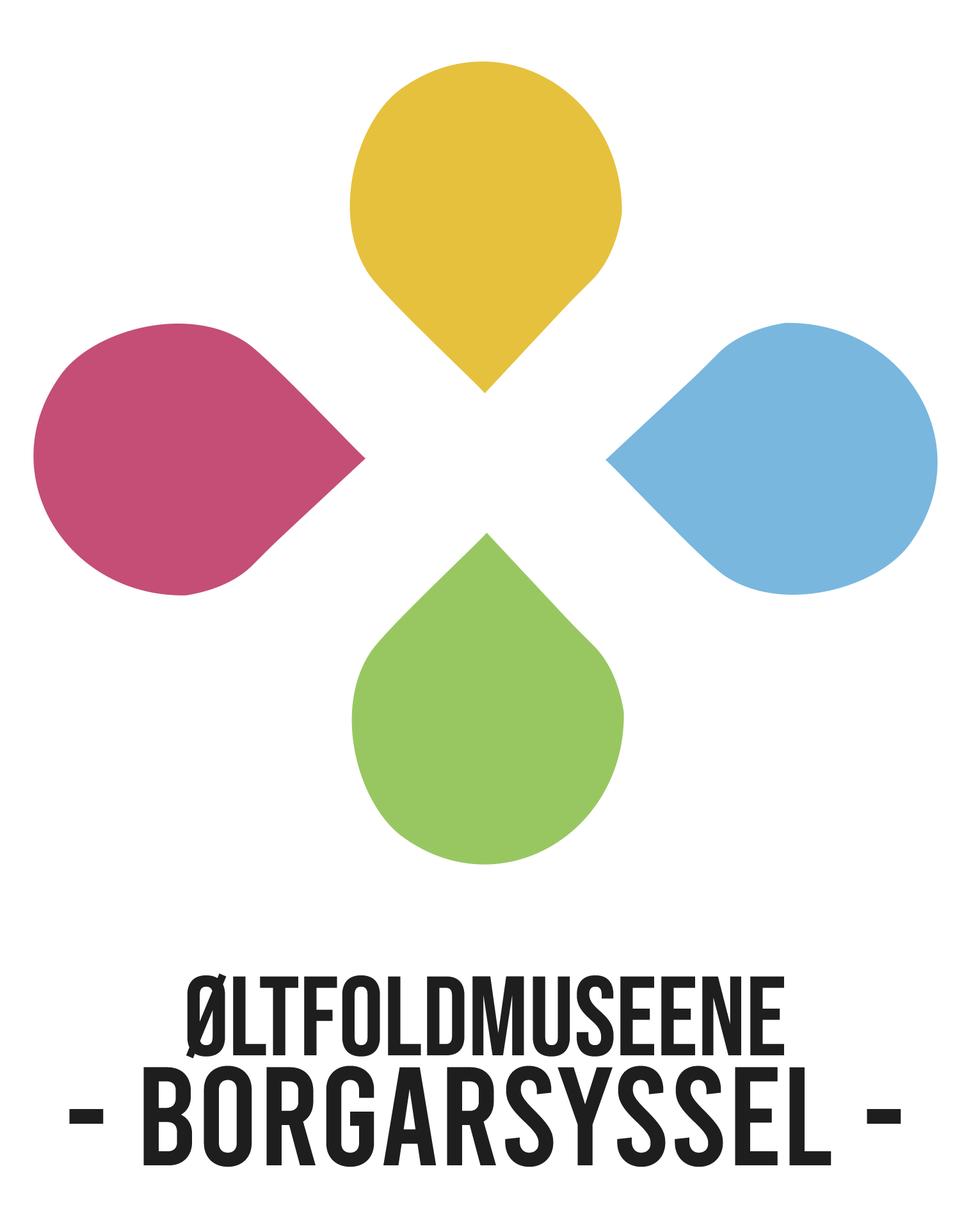
<style>
.page{position:relative;width:971px;height:1228px;background:#ffffff}
.page>*{position:absolute;margin:0}
.t1{font:140.1px/110.1px "Bebas-Regular";color:#1e1e1e}
.t2{font:112.6px/110.1px "BebasNeue-Regular";color:#1e1e1e}
</style>
<div class="page">
<p class="t1" style="left:69px;top:974px;width:832px;height:194px;text-align:center"><span class="t2">øltfoldmuseene<br></span>- Borgarsyssel -</p>
</div>
